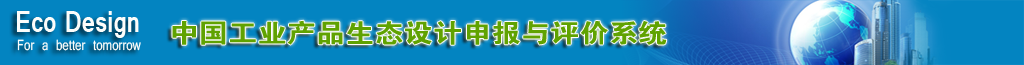
<style>
.page{position:relative;width:1024px;height:65px;background:#0384c1}
.page>*{position:absolute;margin:0}
.t1{font:32px "Vrinda-Bold";color:#fcfdfb;scale:0.8 1}
.t2{font:26px "FZDHTJW--GB1-0";color:#60a201;scale:1.13 1}
.t3{font:16px "Vrinda";color:#fcfdfb;scale:0.8 1}
</style>
<div class="page">
<p class="t1" style="left:17px;top:11px;width:122px;height:27px">Eco Design</p>
<p class="t2" style="left:172px;top:20px;width:495px;height:25px">中国工业产品生态设计申报与评价系统</p>
<p class="t3" style="left:17px;top:39px;width:124px;height:12px">For a better tomorrow</p>
</div>
